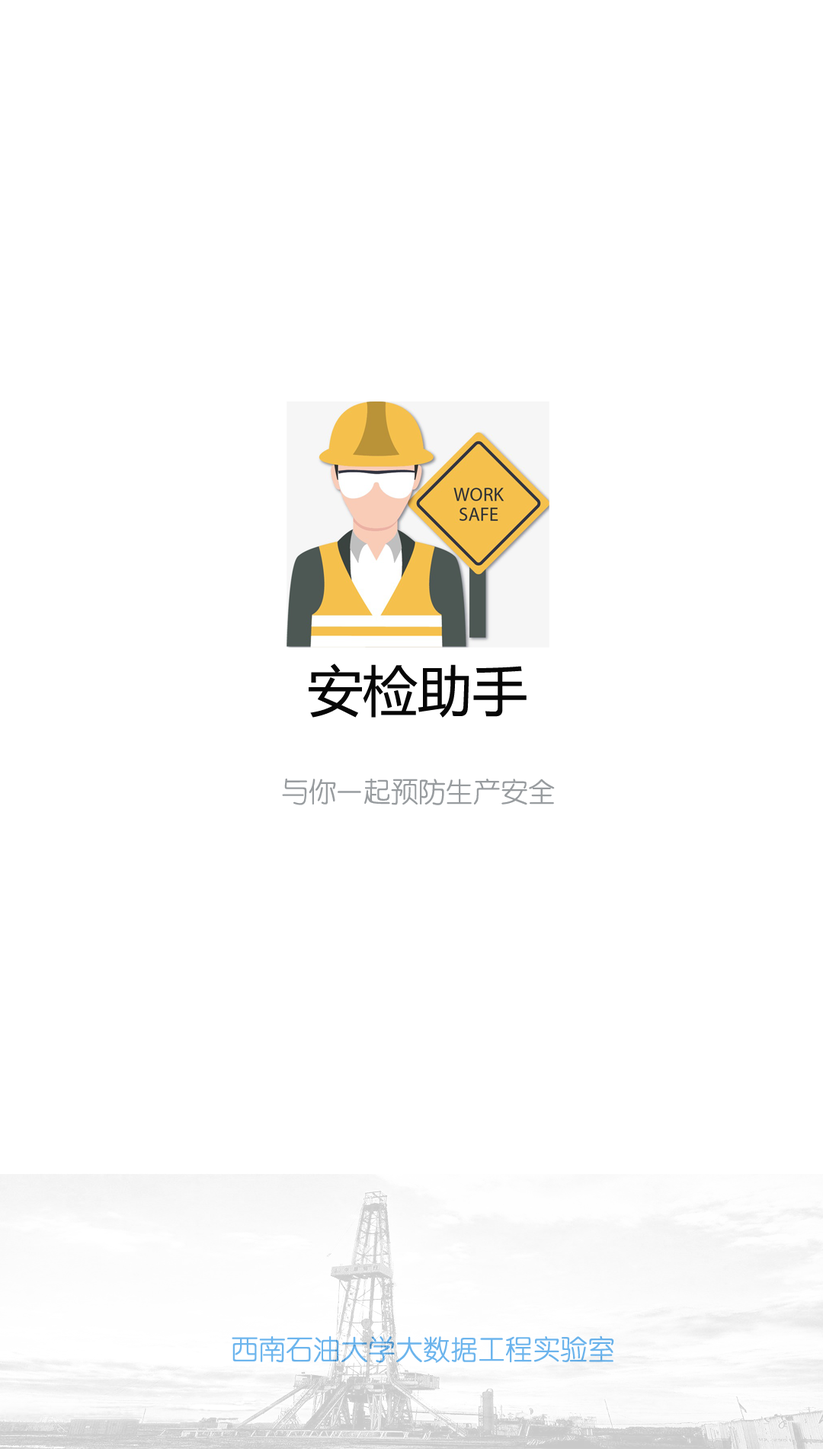
<style>
.page{position:relative;width:823px;height:1449px;background:#ffffff}
.page>*{position:absolute;margin:0}
.t1{font:54.9px "MicrosoftYaHei";color:#070707}
.t2{font:27.4px "HYe2gj";color:#989c9f}
.t3{font:27.4px "HYe2gj";color:#6cb4ed}
</style>
<div class="page">
<p class="t1" style="left:309px;top:664px;width:217px;height:54px">安检助手</p>
<p class="t2" style="left:282px;top:779px;width:273px;height:26px">与你一起预防生产安全</p>
<p class="t3" style="left:232px;top:1336px;width:382px;height:27px">西南石油大学大数据工程实验室</p>
</div>
